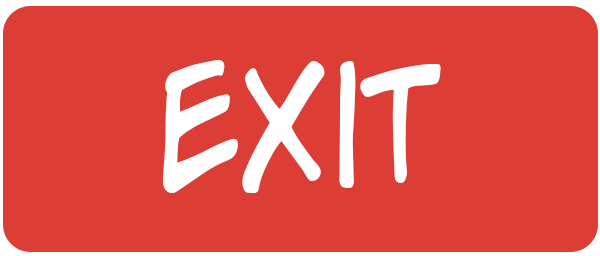
<style>
.page{position:relative;width:600px;height:256px;background:#dc3d35}
.page>*{position:absolute;margin:0}
.t1{font:158.9px "CCWildWordsRoman";color:#ffffff;scale:0.83 1}
</style>
<div class="page">
<p class="t1" style="left:163px;top:60px;width:278px;height:133px">Exit</p>
</div>
